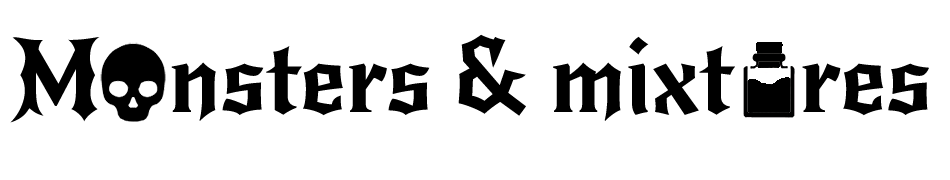
<style>
.page{position:relative;width:950px;height:180px;background:#ffffff}
.page>*{position:absolute;margin:0}
.t1{font:100px "NewRocker-Regular";letter-spacing:-0.005em;color:#000000}
</style>
<div class="page">
<p class="t1" style="left:10px;top:34px;width:919px;height:89px">M   nsters &amp; mixt   res</p>
</div>
